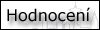
<style>
.page{position:relative;width:100px;height:30px;background:#ffffff}
.page>*{position:absolute;margin:0}
.t1{font:16px "Verdana";color:#000000}
</style>
<div class="page">
<p class="t1" style="left:7px;top:7px;width:83px;height:15px">Hodnocení</p>
</div>
